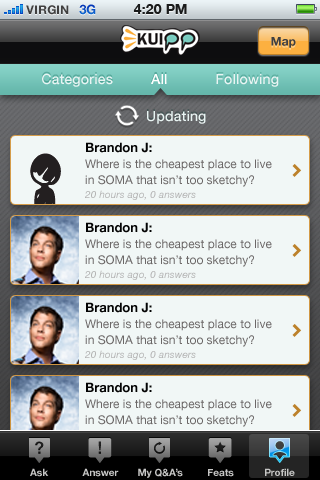
<style>
.page{position:relative;width:320px;height:480px;background:#f1f7f6}
.page>*{position:absolute;margin:0}
.t1{font:12px "HelveticaNeue-Bold";color:#404040;text-transform:uppercase}
.t2{font:13px "HelveticaNeue-Bold";color:#0c54c5;text-transform:uppercase}
.t3{font:14px "HelveticaNeue-Bold";color:#1a1b1b;text-transform:uppercase}
.t4{font:12px "HelveticaNeue-Bold";color:#404041}
.t5{font:14px "HelveticaNeue-Medium";letter-spacing:0.01em;color:#e9f4f3}
.t6{font:14px "HelveticaNeue-Medium";letter-spacing:0.01em;color:#ffffff}
.t7{font:12px/16px "HelveticaNeue";color:#6c6868}
.t8{font:13px/44px "HelveticaNeue-Bold";color:#040404}
.t9{font:12px/15px "HelveticaNeue";color:#6c6868}
.t10{font:10px/14px "HelveticaNeue-Italic";letter-spacing:0.01em;color:#b3b3b3}
.t11{font:10px "HelveticaNeue-Bold";color:#c6c6c5}
</style>
<div class="page">
<p class="t1" style="left:26px;top:5px;width:43px;height:10px">VIRGIN</p>
<p class="t2" style="left:79px;top:4px;width:17px;height:11px">3G</p>
<p class="t3" style="left:133px;top:4px;width:54px;height:10px">4:20 PM</p>
<p class="t4" style="left:271px;top:37px;width:25px;height:11px">Map</p>
<p class="t5" style="left:42px;top:73px;width:71px;height:14px">Categories</p>
<p class="t6" style="left:151px;top:74px;width:16px;height:10px">All</p>
<p class="t5" style="left:216px;top:74px;width:63px;height:13px">Following</p>
<p class="t5" style="left:147px;top:111px;width:59px;height:13px">Updating</p>
<p class="t7" style="left:85px;top:142px;width:187px;height:58px"><span class="t8">Brandon J:<br></span>Where is the cheapest place to live <br>in <span class="t9">SOMA that isn’t too sketchy?<br></span><span class="t10">20 hours ago, 0 answers</span></p>
<p class="t7" style="left:85px;top:222px;width:187px;height:58px"><span class="t8">Brandon J:<br></span>Where is the cheapest place to live <br>in <span class="t9">SOMA that isn’t too sketchy?<br></span><span class="t10">20 hours ago, 0 answers</span></p>
<p class="t7" style="left:85px;top:302px;width:187px;height:58px"><span class="t8">Brandon J:<br></span>Where is the cheapest place to live <br>in <span class="t9">SOMA that isn’t too sketchy?<br></span><span class="t10">20 hours ago, 0 answers</span></p>
<p class="t7" style="left:85px;top:382px;width:187px;height:58px"><span class="t8">Brandon J:<br></span>Where is the cheapest place to live <br>in <span class="t9">SOMA that isn’t too sketchy?<br></span><span class="t10">20 hours ago, 0 answers</span></p>
<p class="t11" style="left:30px;top:468px;width:19px;height:9px">Ask</p>
<p class="t11" style="left:82px;top:468px;width:37px;height:9px">Answer</p>
<p class="t11" style="left:138px;top:468px;width:45px;height:10px">My Q&amp;A’s</p>
<p class="t11" style="left:208px;top:469px;width:26px;height:8px">Feats</p>
<p class="t11" style="left:265px;top:468px;width:30px;height:8px">Profile</p>
</div>
